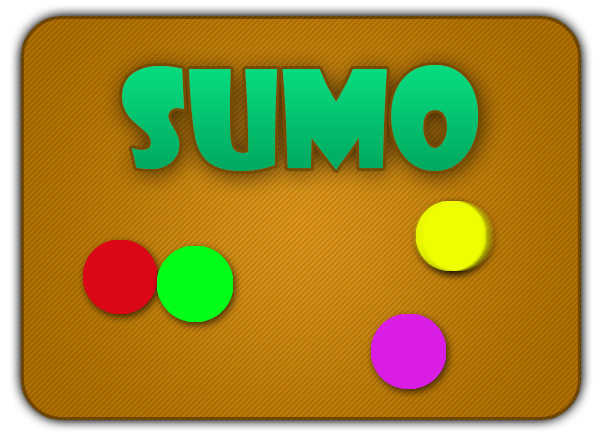
<style>
.page{position:relative;width:601px;height:436px}
.page>*{position:absolute;margin:0}
.t1{font:132.5px "ShowcardGothic-Reg";color:#03c570}
</style>
<div class="page">
<p class="t1" style="left:122px;top:65px;width:357px;height:106px">sumo</p>
</div>
